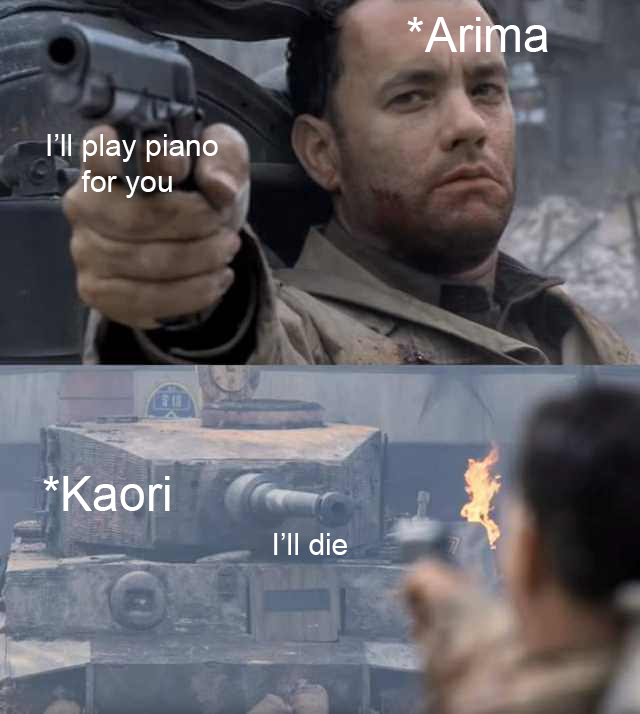
<style>
.page{position:relative;width:640px;height:714px}
.page>*{position:absolute;margin:0}
.t1{font:48px "ArialMT";color:#ffffff}
.t2{font:30px "ArialMT";color:#ffffff}
</style>
<div class="page">
<p class="t1" style="left:407px;top:17px;width:141px;height:35px">*Arima</p>
<p class="t2" style="left:47px;top:134px;width:171px;height:64px;text-align:center">I’ll play piano <br>for you</p>
<p class="t1" style="left:43px;top:476px;width:127px;height:35px">*Kaori</p>
<p class="t2" style="left:274px;top:533px;width:73px;height:22px">I’ll die</p>
</div>
